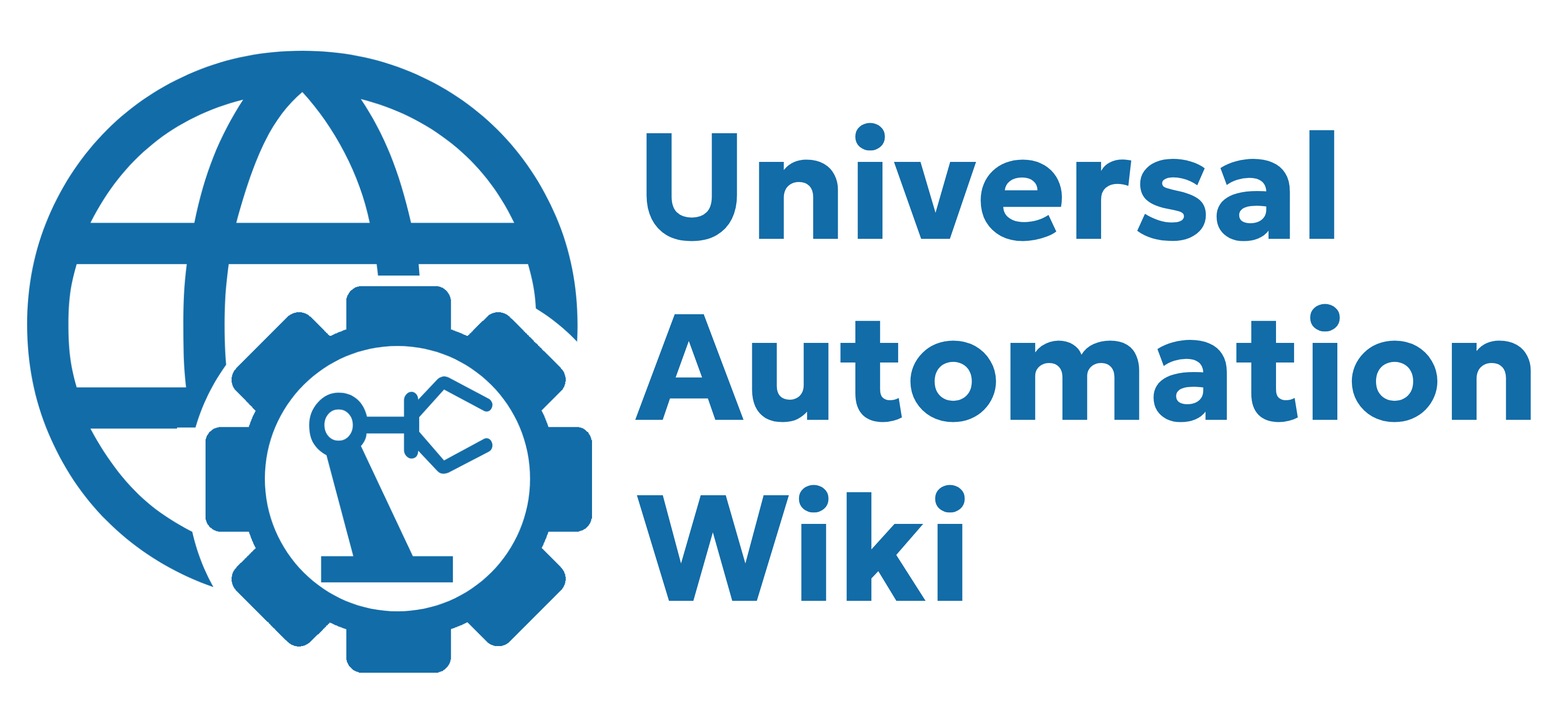
<style>
.page{position:relative;width:1568px;height:724px;background:#ffffff}
.page>*{position:absolute;margin:0}
.t1{font:150.8px "GeologicaThin-Bold";color:#126ca8}
</style>
<div class="page">
<p class="t1" style="left:635px;top:123px;width:896px;height:478px">Universal<br>Automation<br>Wiki</p>
</div>
